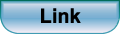
<style>
.page{position:relative;width:120px;height:34px}
.page>*{position:absolute;margin:0}
.t1{font:20px "Arial-BoldMT";color:#000000}
</style>
<div class="page">
<p class="t1" style="left:41px;top:8px;width:40px;height:15px">Link</p>
</div>
